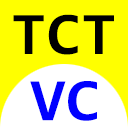
<style>
.page{position:relative;width:128px;height:128px;background:#ffff00}
.page>*{position:absolute;margin:0}
.t1{font:60.7px "Consolas-Bold";color:#000000;scale:1.05 1}
.t2{font:60.7px "Consolas-Bold";color:#0000ff;scale:1.05 1}
</style>
<div class="page">
<p class="t1" style="left:13px;top:14px;width:101px;height:41px">TCT</p>
<p class="t2" style="left:30px;top:81px;width:67px;height:40px">VC</p>
</div>
